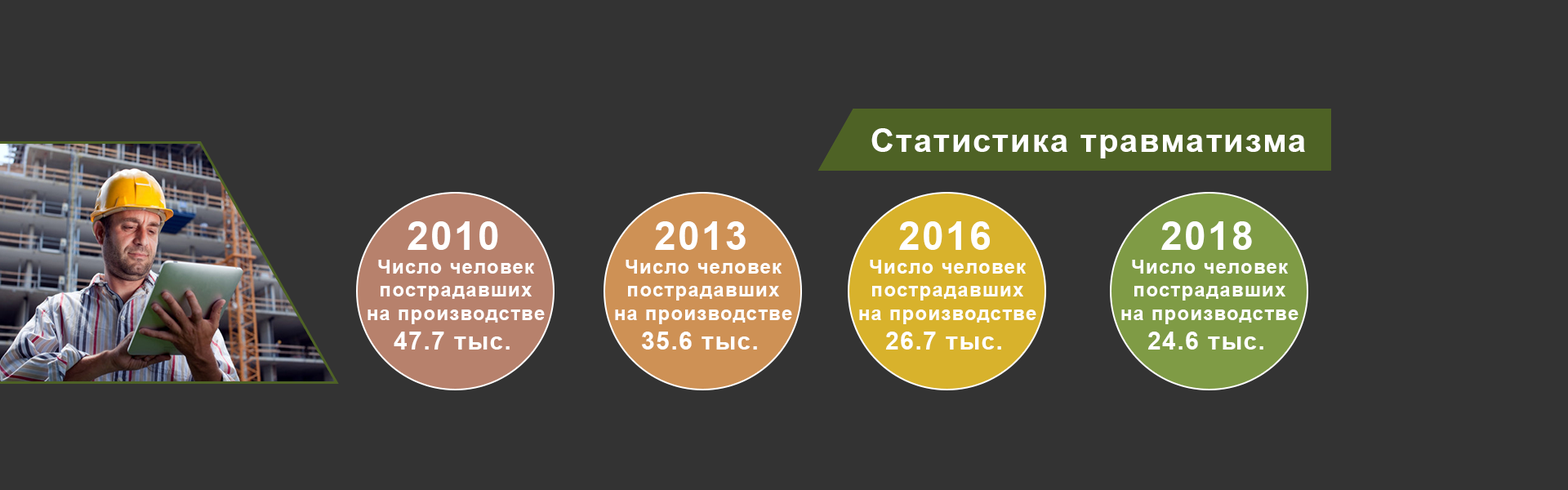
<style>
.page{position:relative;width:1568px;height:490px;background:#333333}
.page>*{position:absolute;margin:0}
.t1{font:32.7px "Arial-BoldMT";letter-spacing:0.05em;color:#ffffff}
.t2{font:39.2px "Arial-BoldMT";letter-spacing:0.05em;color:#ffffff}
.t3{font:19.6px "Arial-BoldMT";letter-spacing:0.05em;color:#ffffff}
.t4{font:24.5px "Arial-BoldMT";letter-spacing:0.05em;color:#ffffff}
</style>
<div class="page">
<p class="t1" style="left:871px;top:128px;width:434px;height:30px">Статистика травматизма</p>
<p class="t2" style="left:408px;top:221px;width:90px;height:29px">2010</p>
<p class="t2" style="left:655px;top:221px;width:91px;height:29px">2013</p>
<p class="t2" style="left:899px;top:221px;width:91px;height:29px">2016</p>
<p class="t2" style="left:1161px;top:221px;width:91px;height:29px">2018</p>
<p class="t3" style="left:368px;top:260px;width:177px;height:90px;text-align:center">Число человек<br>пострадавших<br>на производстве<br><span class="t4">47.7 тыс.</span></p>
<p class="t3" style="left:615px;top:260px;width:177px;height:90px;text-align:center">Число человек<br>пострадавших<br>на производстве<br><span class="t4">35.6 тыс.</span></p>
<p class="t3" style="left:859px;top:260px;width:177px;height:90px;text-align:center">Число человек<br>пострадавших<br>на производстве<br><span class="t4">26.7 тыс.</span></p>
<p class="t3" style="left:1121px;top:260px;width:177px;height:90px;text-align:center">Число человек<br>пострадавших<br>на производстве<br><span class="t4">24.6 тыс.</span></p>
</div>
